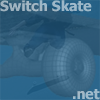
<style>
.page{position:relative;width:100px;height:100px}
.page>*{position:absolute;margin:0}
.t1{font:14px "Tahoma-Bold";color:#9db6c5}
.t2{font:14px "Tahoma-Bold";color:#9fbacb}
</style>
<div class="page">
<p class="t1" style="left:0px;top:0px;width:92px;height:12px">Switch Skate</p>
<p class="t2" style="left:73px;top:89px;width:27px;height:11px">.net</p>
</div>
